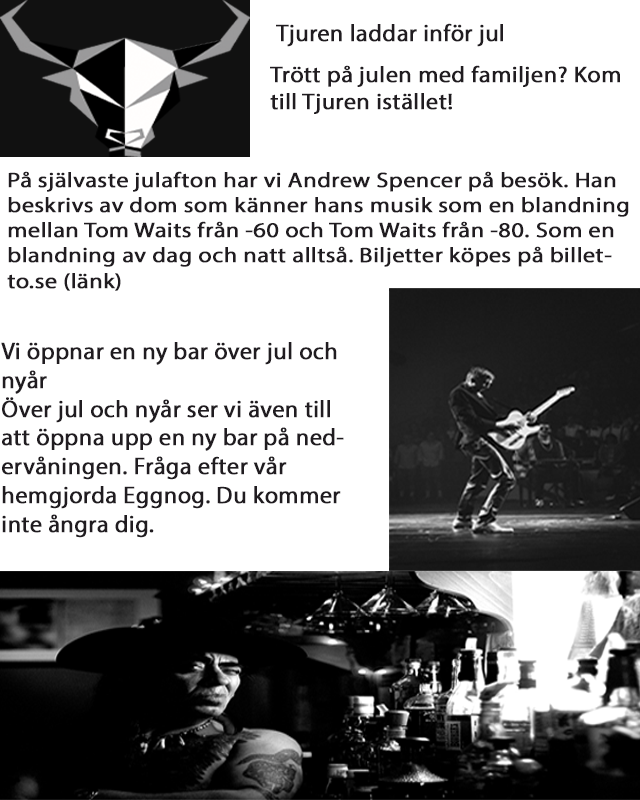
<style>
.page{position:relative;width:640px;height:800px;background:#ffffff}
.page>*{position:absolute;margin:0}
.t1{font:12px "MyriadPro-Regular";color:#201c20;font-weight:bold}
.t2{font:11.3px "MyriadPro-Regular";color:#201c20;font-weight:bold;scale:1.06 1}
.t3{font:21.1px "MyriadPro-Regular";color:#201c20;font-weight:bold;scale:1.14 1}
</style>
<div class="page">
<p class="t1" style="left:276px;top:23px;width:227px;height:24px">Tjuren laddar inför jul</p>
<p class="t2" style="left:270px;top:65px;width:350px;height:49px">Trött på julen med familjen? Kom till Tjuren istället!</p>
<p class="t3" style="left:7px;top:171px;width:622px;height:120px">På självaste julafton har vi Andrew Spencer på besök. Han beskrivs av dom som känner hans musik som en blandning mellan Tom Waits från -60 och Tom Waits från -80. Som en blandning av dag och natt alltså. Biljetter köpes på billetto.se (länk)</p>
<p class="t1" style="left:1px;top:342px;width:343px;height:196px">Vi öppnar en ny bar över jul och nyår<br>Över jul och nyår ser vi även till att öppna upp en ny bar på nedervåningen. Fråga efter vår hemgjorda Eggnog. Du kommer inte ångra dig.</p>
</div>
